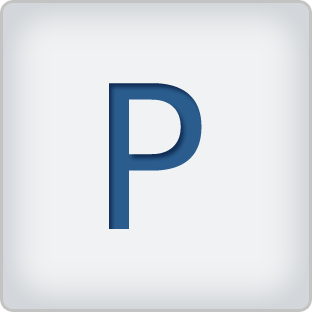
<style>
.page{position:relative;width:312px;height:312px;background:#f1f2f3}
.page>*{position:absolute;margin:0}
.t1{font:200px "Menlo-Regular";letter-spacing:0.05em;color:#2a5d8e}
</style>
<div class="page">
<p class="t1" style="left:109px;top:83px;width:93px;height:146px">P</p>
</div>
